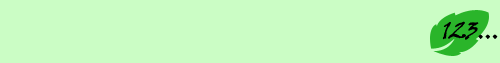
<style>
.page{position:relative;width:500px;height:63px;background:#cbfdc5}
.page>*{position:absolute;margin:0}
.t1{font:24px "VinerHandITC";color:#000000}
</style>
<div class="page">
<p class="t1" style="left:442px;top:21px;width:56px;height:19px">123...</p>
</div>
